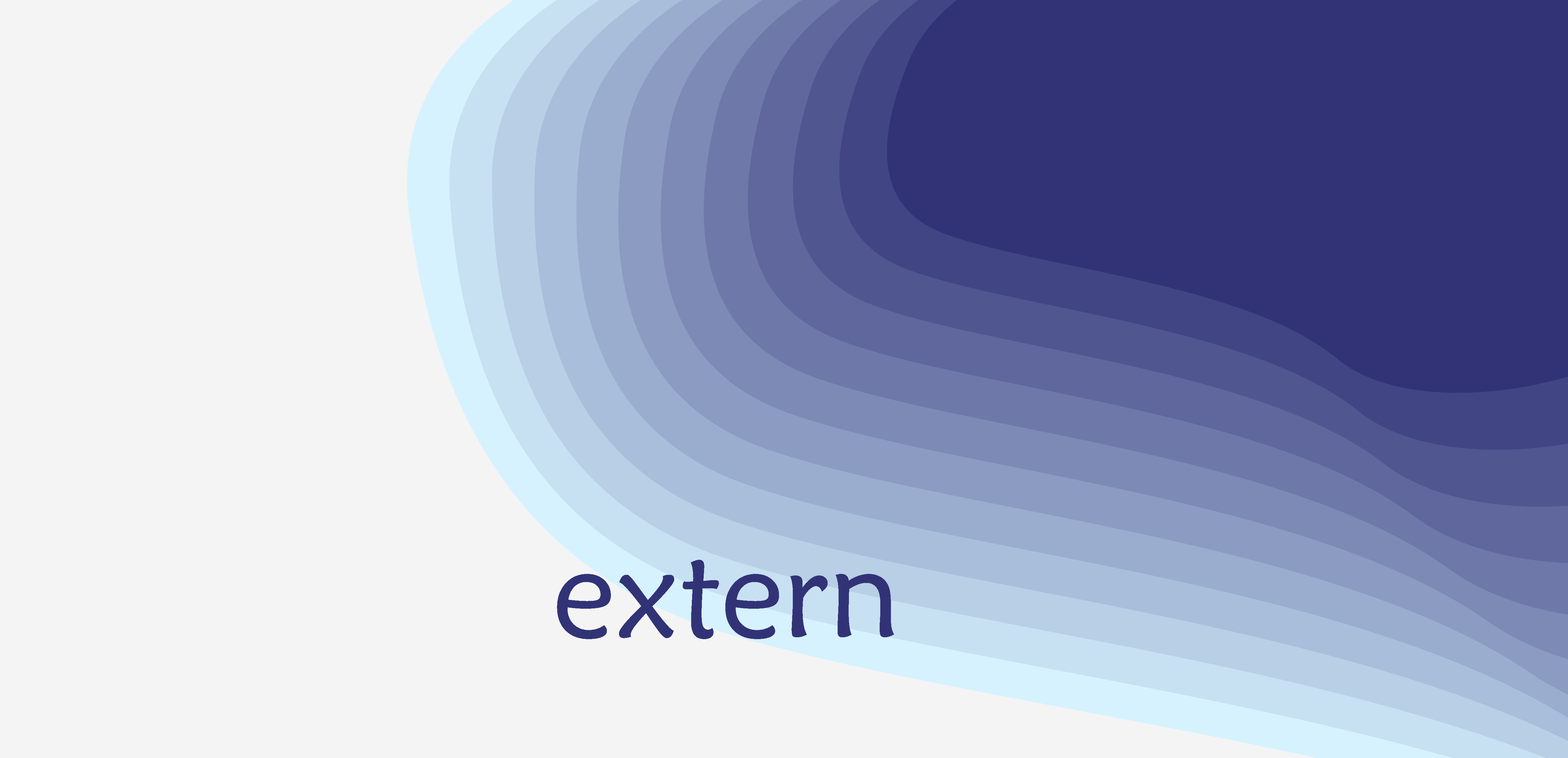
<style>
.page{position:relative;width:1568px;height:758px;background:#f4f4f4}
.page>*{position:absolute;margin:0}
.t1{font:126.6px "STXinwei";color:#323377}
</style>
<div class="page">
<p class="t1" style="left:557px;top:560px;width:337px;height:79px">extern</p>
</div>
